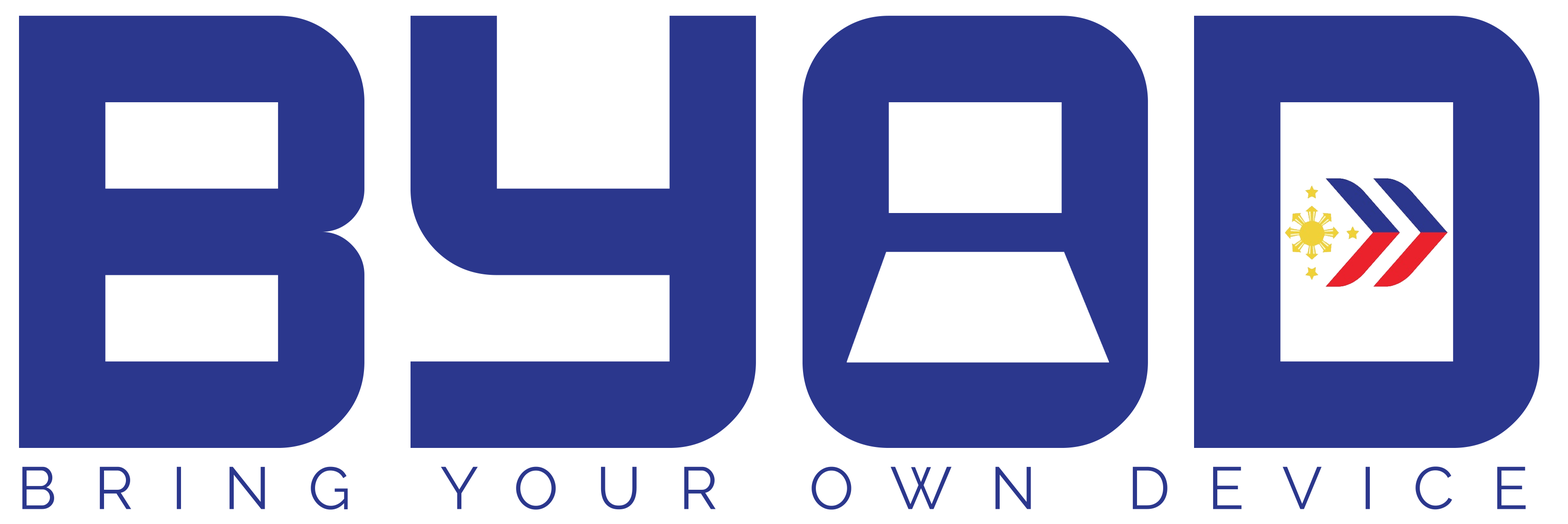
<style>
.page{position:relative;width:1568px;height:524px;background:#2b378d}
.page>*{position:absolute;margin:0}
.t1{font:59.4px "Raleway-Regular";letter-spacing:0.64em;color:#2b378d}
</style>
<div class="page">
<p class="t1" style="left:22px;top:466px;width:1504px;height:43px">BRING YOUR OWN DEVICE</p>
</div>
